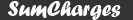
<style>
.page{position:relative;width:133px;height:20px;background:#333333}
.page>*{position:absolute;margin:0}
.t1{font:21.6px "ForteMT";color:#ffffff}
</style>
<div class="page">
<p class="t1" style="left:8px;top:1px;width:113px;height:19px">SumCharges</p>
</div>
